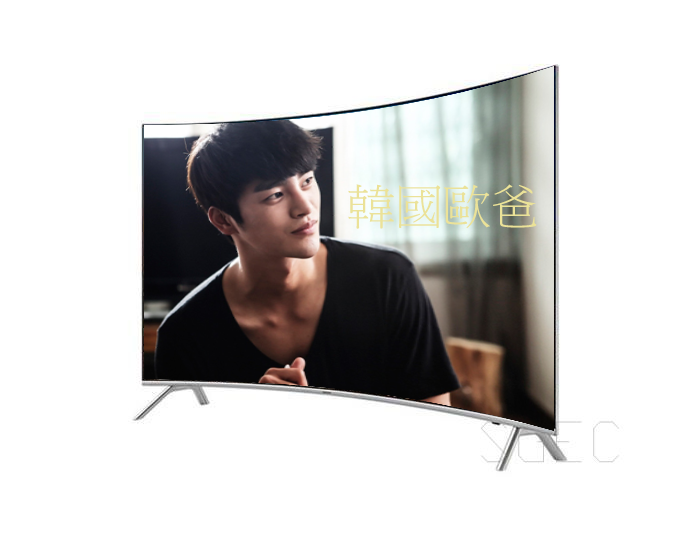
<style>
.page{position:relative;width:700px;height:536px;background:#ffffff}
.page>*{position:absolute;margin:0}
.t1{font:48px "MingLiU";color:#ebe298}
</style>
<div class="page">
<p class="t1" style="left:348px;top:184px;width:189px;height:45px">韓國歐爸</p>
</div>
